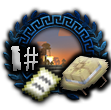
<style>
.page{position:relative;width:111px;height:110px;background:#ffffff}
.page>*{position:absolute;margin:0}
.t1{font:35.5px "MinecraftEvenings"}
.t2{font:35.5px "MyriadPro-Regular"}
</style>
<div class="page">
<p class="t1" style="left:11px;top:46px;width:27px;height:25px;rotate:-5deg">1<span class="t2">#</span></p>
</div>
